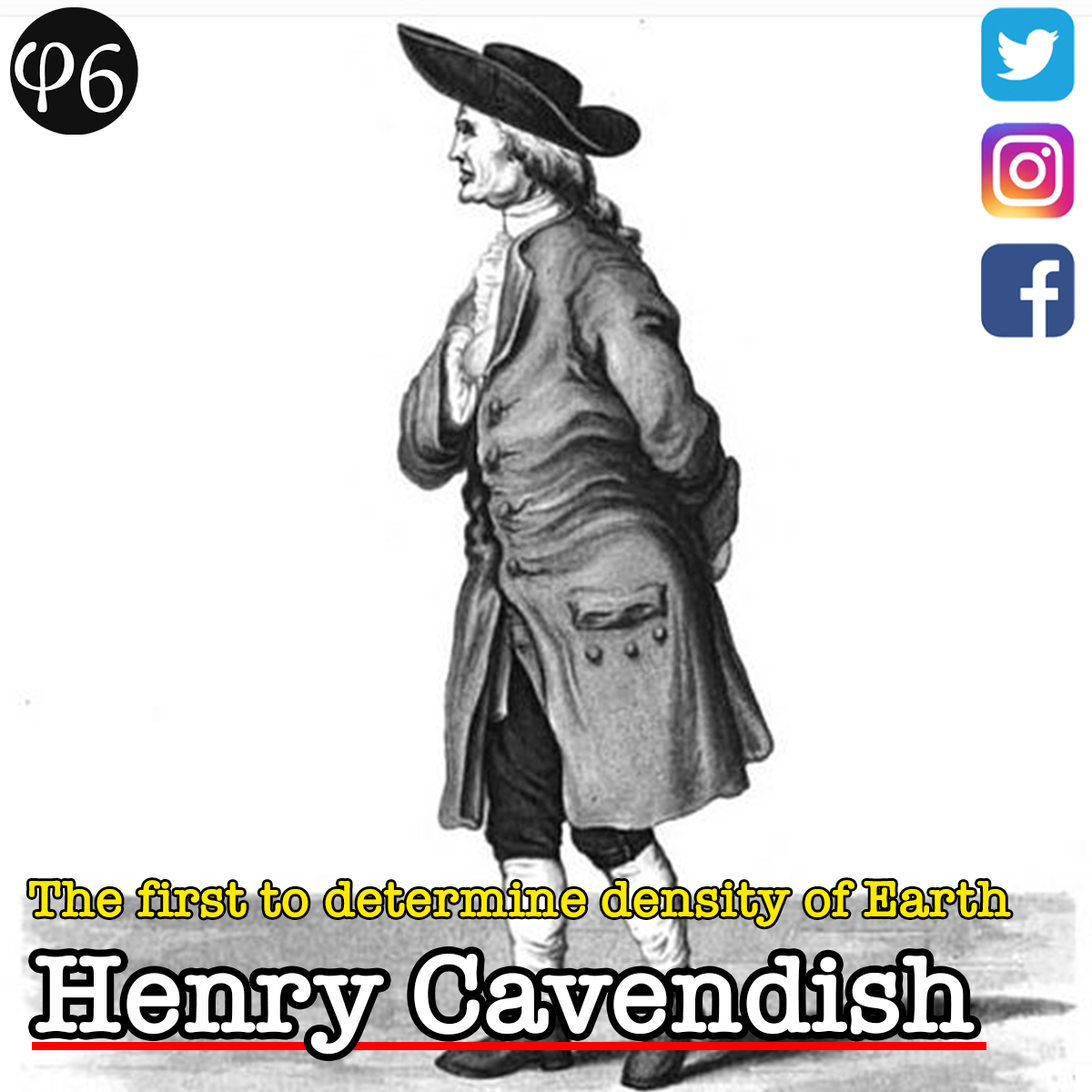
<style>
.page{position:relative;width:1092px;height:1092px;background:#ffffff}
.page>*{position:absolute;margin:0}
.t1{font:53.1px "AmericanTypewriter-Semibold";color:#ffea00}
.t2{font:113.7px "AmericanTypewriter-Semibold";color:#ffffff}
</style>
<div class="page">
<p class="t1" style="left:29px;top:880px;width:982px;height:47px">The first to determine density of Earth</p>
<p class="t2" style="left:35px;top:954px;width:940px;height:100px">Henry Cavendish</p>
</div>
